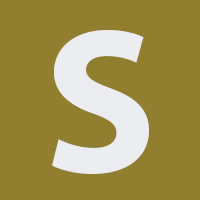
<style>
.page{position:relative;width:200px;height:200px;background:#917f2f}
.page>*{position:absolute;margin:0}
.t1{font:208.3px "MyriadPro-Bold";color:#ecedf1}
</style>
<div class="page">
<p class="t1" style="left:52px;top:30px;width:97px;height:144px">S</p>
</div>
